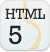
<style>
.page{position:relative;width:50px;height:52px}
.page>*{position:absolute;margin:0}
.t1{font:15px "Rockwell";color:#2a2a2a}
.t2{font:27px "Rockwell";color:#252525}
</style>
<div class="page">
<p class="t1" style="left:5px;top:8px;width:40px;height:12px">HTML</p>
<p class="t2" style="left:9px;top:25px;width:13px;height:20px">5</p>
</div>
